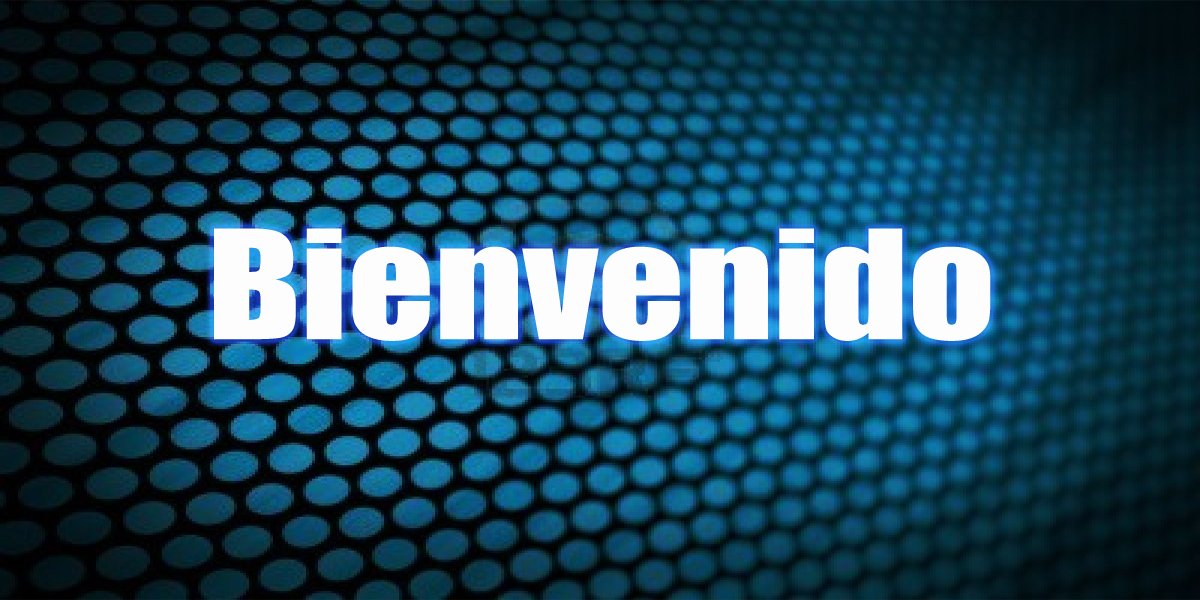
<style>
.page{position:relative;width:1200px;height:600px}
.page>*{position:absolute;margin:0}
.t1{font:139.8px "Impact";color:#fdfdfd;scale:1.22 1}
</style>
<div class="page">
<p class="t1" style="left:214px;top:228px;width:777px;height:113px">Bienvenido</p>
</div>
